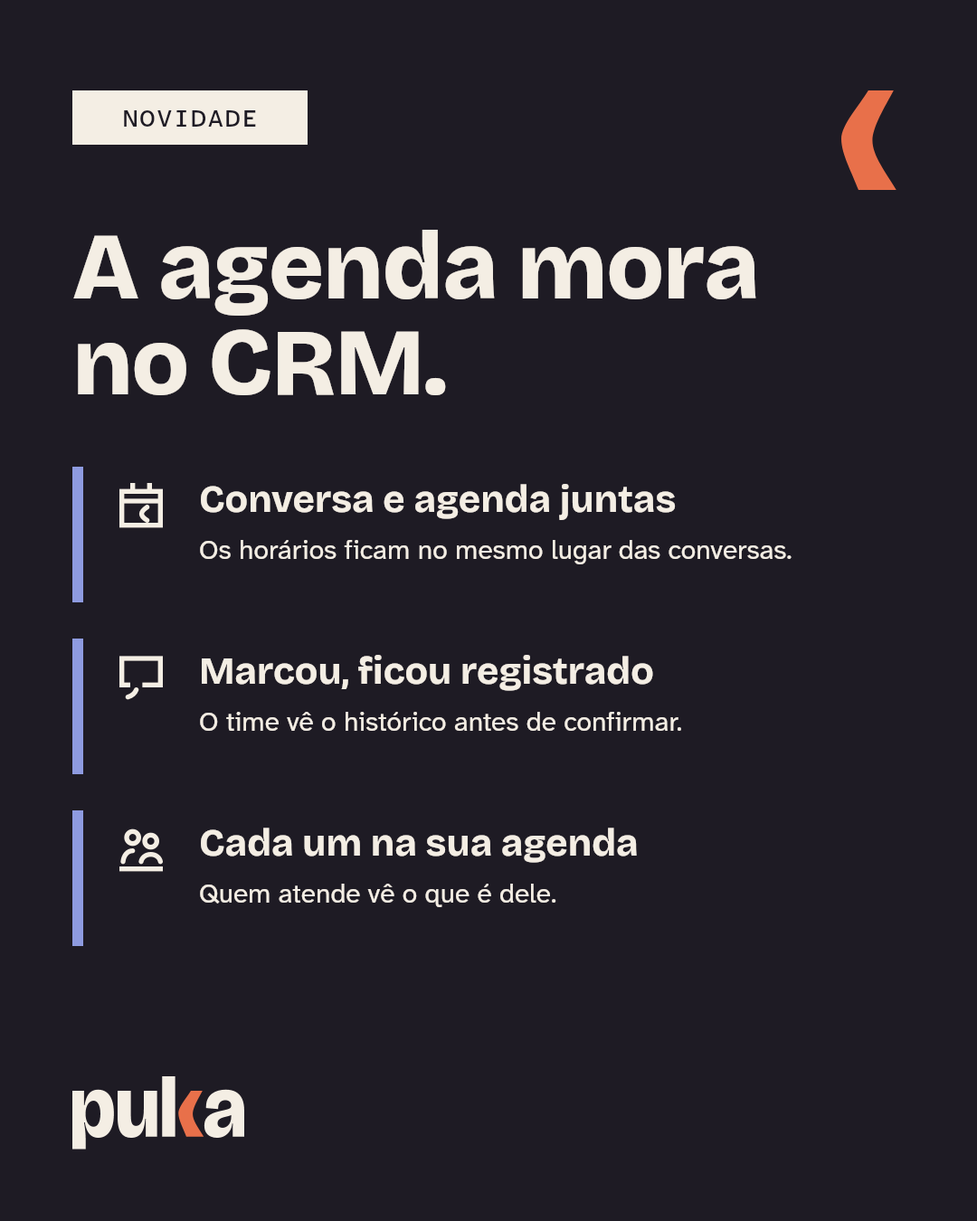
<style>
.page{position:relative;width:977px;height:1221px;background:#1e1b24}
.page>*{position:absolute;margin:0}
.t1{font:25.3px "AtkinsonHyperlegibleMono-Medium";letter-spacing:0.04em;color:#1e1b24}
.t2{font:94.1px/95.9px "BricolageGrotesque-ExtraBold";letter-spacing:-0.012em;color:#f4eee4}
.t3{font:38px "BricolageGrotesque-Bold";color:#f4eee4}
.t4{font:27.1px "AtkinsonHyperlegibleNext-Regular";color:#f4eee4}
</style>
<div class="page">
<p class="t1" style="left:124px;top:110px;width:132px;height:17px">NOVIDADE</p>
<p class="t2" style="left:73px;top:230px;width:683px;height:165px">A agenda mora<br>no CRM.</p>
<p class="t3" style="left:201px;top:484px;width:475px;height:36px">Conversa e agenda juntas</p>
<p class="t4" style="left:200px;top:540px;width:591px;height:24px">Os horários ficam no mesmo lugar das conversas.</p>
<p class="t3" style="left:202px;top:655px;width:451px;height:36px">Marcou, ficou registrado</p>
<p class="t4" style="left:200px;top:712px;width:481px;height:19px">O time vê o histórico antes de confirmar.</p>
<p class="t3" style="left:201px;top:827px;width:436px;height:36px">Cada um na sua agenda</p>
<p class="t4" style="left:200px;top:884px;width:356px;height:23px">Quem atende vê o que é dele.</p>
</div>
